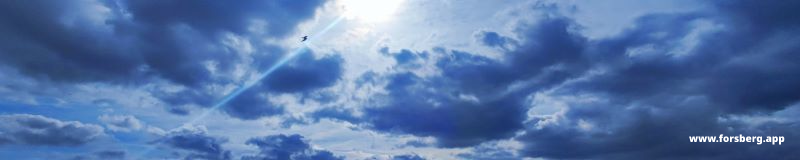
<style>
.page{position:relative;width:800px;height:160px}
.page>*{position:absolute;margin:0}
.t1{font:10px "NotoSans-Black";color:#eeeeee}
</style>
<div class="page">
<p class="t1" style="left:689px;top:134px;width:96px;height:11px">www.forsberg.app</p>
</div>
